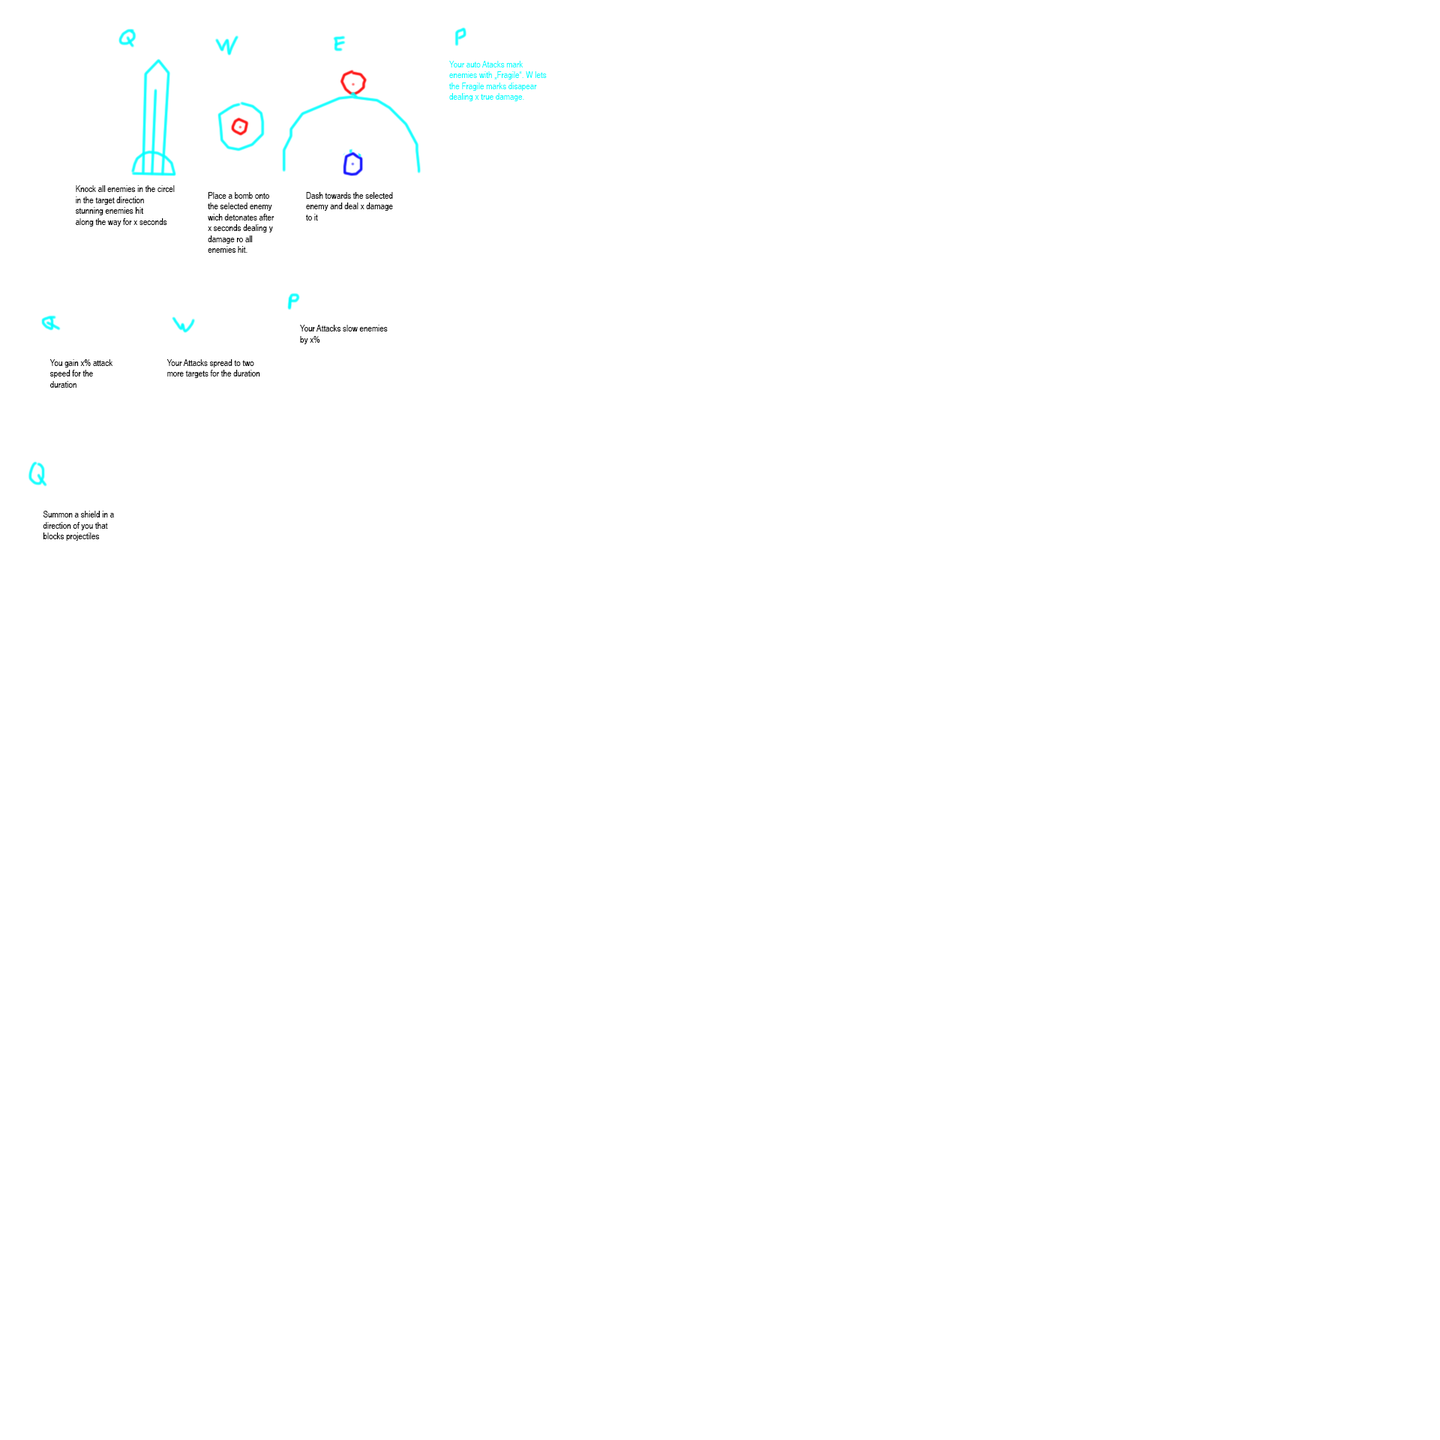
<style>
.page{position:relative;width:1440px;height:1440px;background:#ffffff}
.page>*{position:absolute;margin:0}
.t1{font:9px "ArialNarrow";color:#00ffff}
.t2{font:9px "ArialNarrow";color:#000000}
</style>
<div class="page">
<p class="t1" style="left:449px;top:61px;width:98px;height:40px">Your auto Atacks mark enemies with „Fragile“. W lets the Fragile marks disapear dealing x true damage.</p>
<p class="t2" style="left:76px;top:185px;width:99px;height:41px">Knock all enemies in the circel <br>in the target direction<br>stunning enemies hit <br>along the way for x seconds</p>
<p class="t2" style="left:208px;top:192px;width:66px;height:61px">Place a bomb onto the selected enemy wich detonates after x seconds dealing y damage ro all enemies hit.</p>
<p class="t2" style="left:306px;top:192px;width:87px;height:28px">Dash towards the selected enemy and deal x damage to it</p>
<p class="t2" style="left:300px;top:325px;width:88px;height:19px">Your Attacks slow enemies by x%</p>
<p class="t2" style="left:50px;top:359px;width:63px;height:29px">You gain x% attack speed for the duration</p>
<p class="t2" style="left:166px;top:359px;width:94px;height:19px">Your Attacks spread to two more targets for the duration</p>
<p class="t2" style="left:43px;top:511px;width:71px;height:30px">Summon a shield in a direction of you that blocks projectiles</p>
</div>
